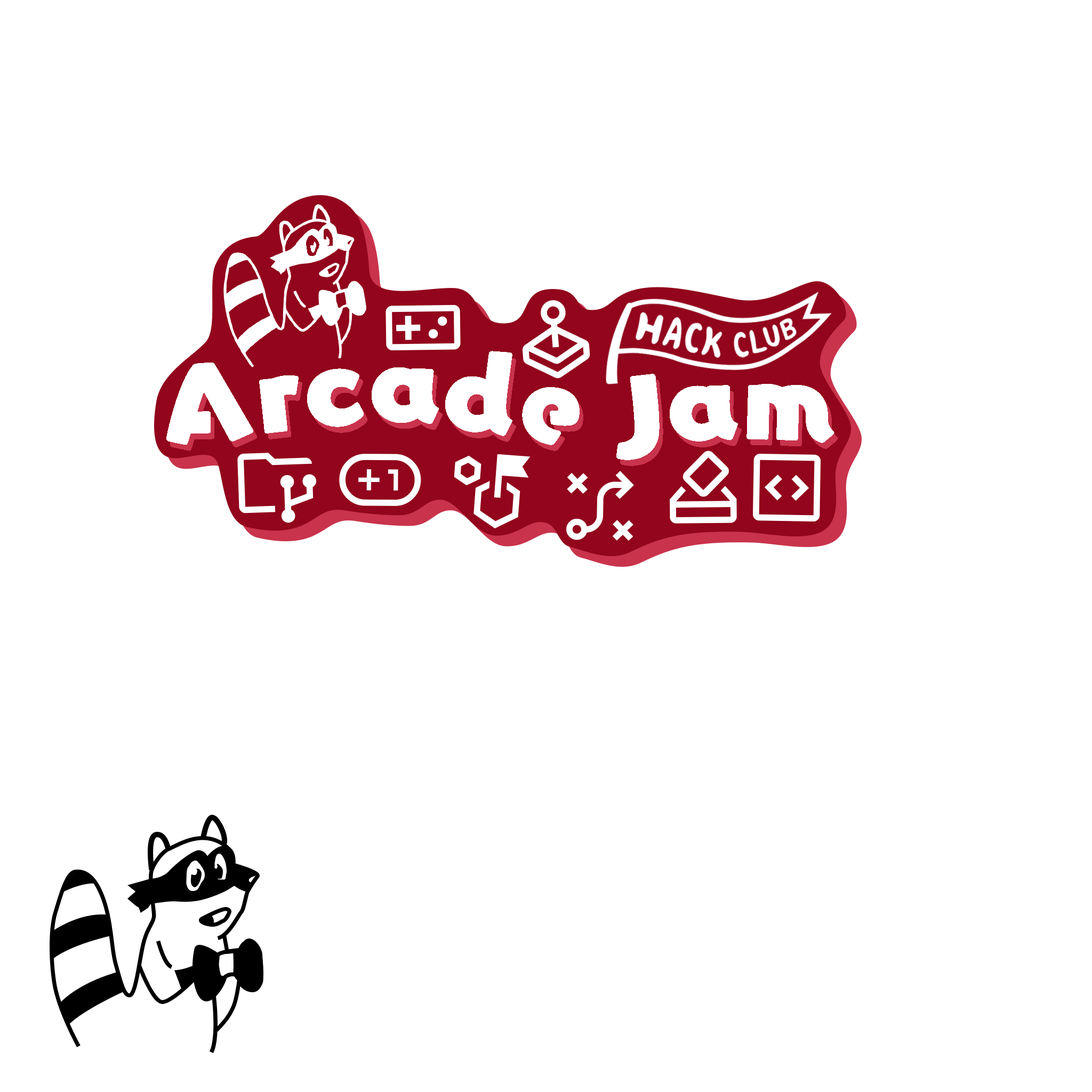
<style>
.page{position:relative;width:1092px;height:1092px;background:#ffffff}
.page>*{position:absolute;margin:0}
.t1{font:96.2px "YurukaStd-UB";color:#ffffff}
</style>
<div class="page">
<p class="t1" style="left:445px;top:351px;width:67px;height:85px;rotate:3deg">d</p>
<p class="t1" style="left:166px;top:363px;width:87px;height:82px;rotate:-4deg">A</p>
<p class="t1" style="left:259px;top:375px;width:40px;height:58px;rotate:-3deg">r</p>
<p class="t1" style="left:307px;top:368px;width:57px;height:59px;rotate:3deg">c</p>
<p class="t1" style="left:372px;top:367px;width:67px;height:57px;rotate:-3deg">a</p>
<p class="t1" style="left:616px;top:374px;width:44px;height:86px;rotate:-9deg">J</p>
<p class="t1" style="left:522px;top:387px;width:58px;height:58px;rotate:13deg">e</p>
<p class="t1" style="left:670px;top:385px;width:68px;height:56px;rotate:-7deg">a</p>
<p class="t1" style="left:746px;top:384px;width:88px;height:59px;rotate:4deg">m</p>
</div>
